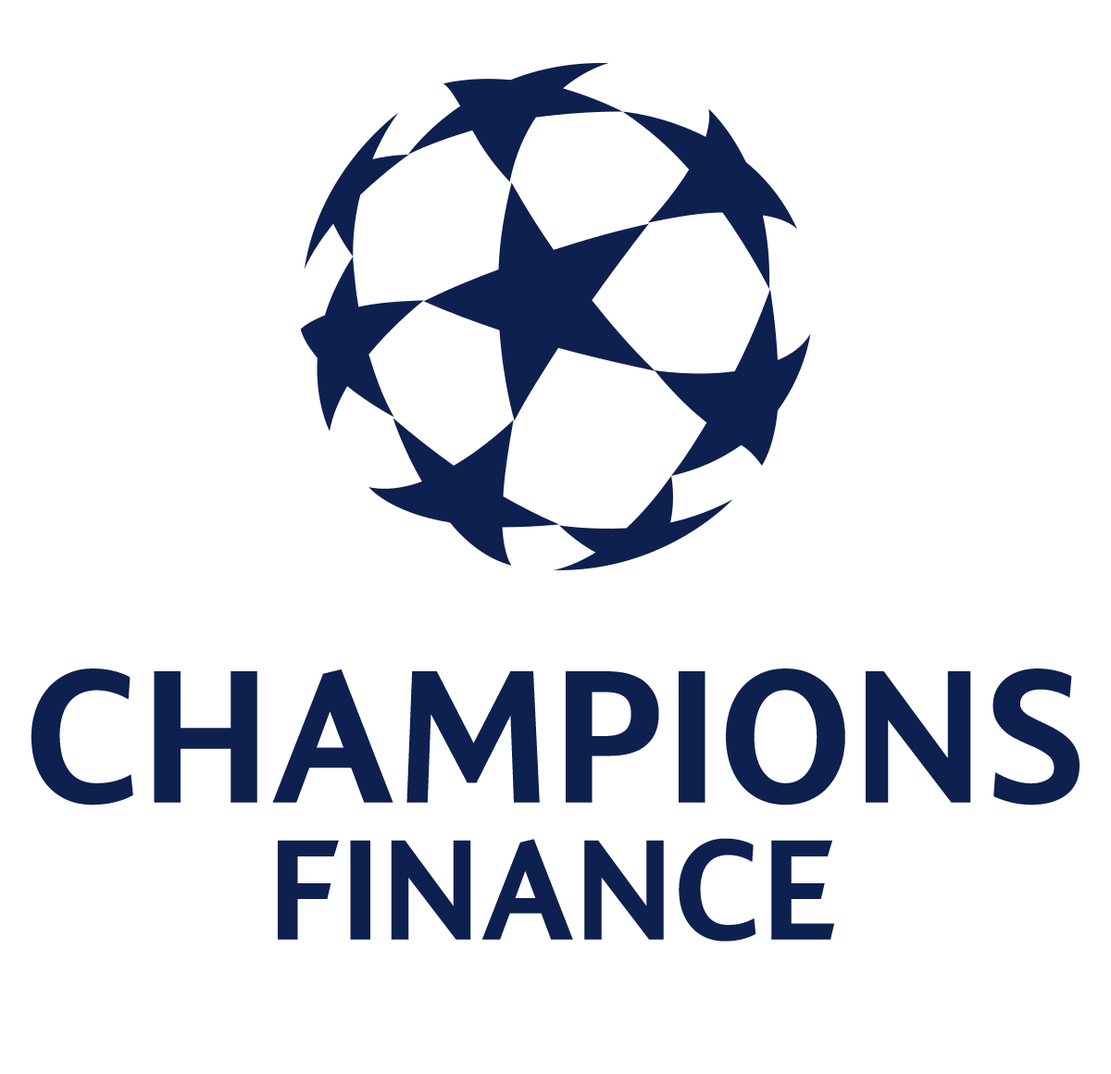
<style>
.page{position:relative;width:1111px;height:1074px;background:#ffffff}
.page>*{position:absolute;margin:0}
.t1{font:208.8px "Champions-Bold";color:#0e2050}
.t2{font:157.3px "Champions-Bold";color:#0e2050}
</style>
<div class="page">
<p class="t1" style="left:31px;top:668px;width:1048px;height:137px">CHAMPIONS</p>
<p class="t2" style="left:278px;top:838px;width:556px;height:103px">FINANCE</p>
</div>
